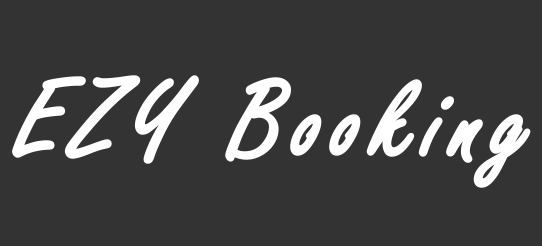
<style>
.page{position:relative;width:542px;height:246px;background:#333333}
.page>*{position:absolute;margin:0}
.t1{font:118.1px "FreestyleScript-Regular";letter-spacing:0.07em;color:#ffffff;font-weight:bold}
</style>
<div class="page">
<p class="t1" style="left:12px;top:75px;width:519px;height:113px">EZY Booking</p>
</div>
